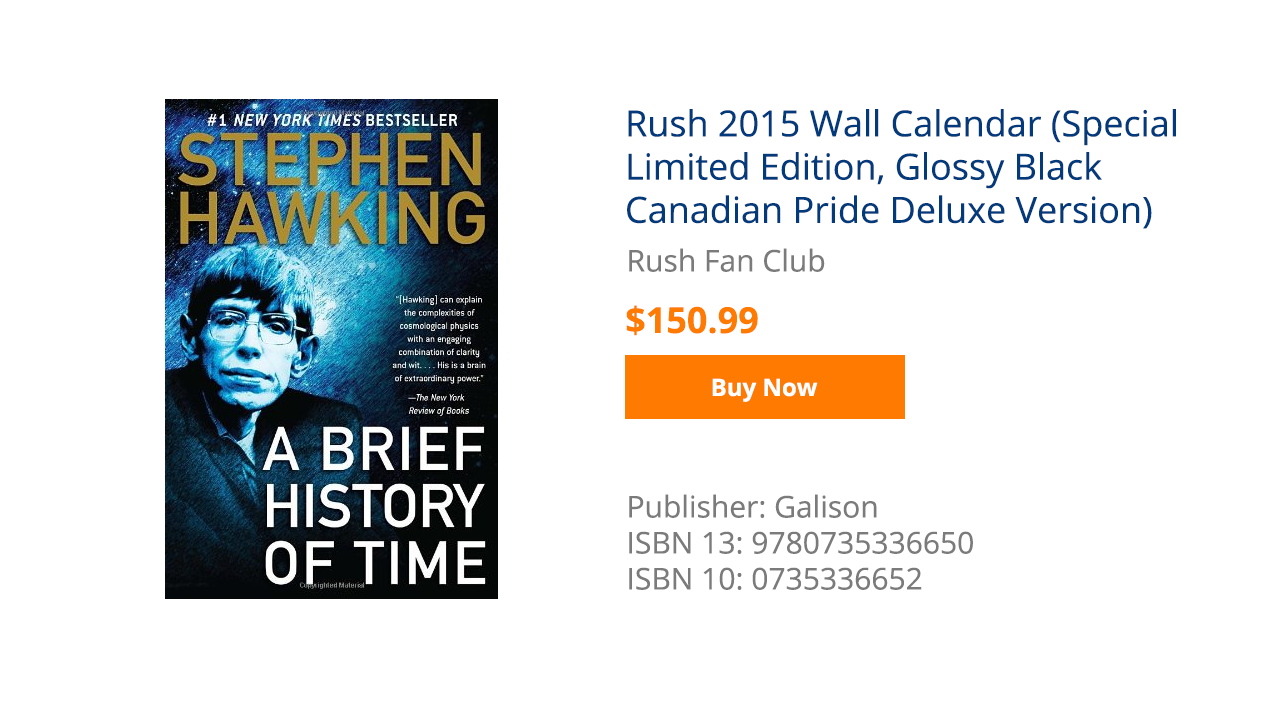
<style>
.page{position:relative;width:1280px;height:720px;background:#ffffff}
.page>*{position:absolute;margin:0}
.t1{font:36px "OpenSans";color:#033a7b}
.t2{font:30px "OpenSans";color:#7b7b7b}
.t3{font:36px "OpenSans-Bold";color:#fe7a00}
.t4{font:24px "OpenSans-Bold";color:#ffffff}
</style>
<div class="page">
<p class="t1" style="left:627px;top:109px;width:549px;height:120px">Rush 2015 Wall Calendar (Special Limited Edition, Glossy Black Canadian Pride Deluxe Version)</p>
<p class="t2" style="left:629px;top:248px;width:196px;height:24px">Rush Fan Club</p>
<p class="t3" style="left:626px;top:305px;width:132px;height:31px">$150.99</p>
<p class="t4" style="left:712px;top:378px;width:106px;height:24px">Buy Now</p>
<p class="t2" style="left:629px;top:494px;width:344px;height:96px">Publisher: Galison<br>ISBN 13: 9780735336650<br>ISBN 10: 0735336652</p>
</div>
